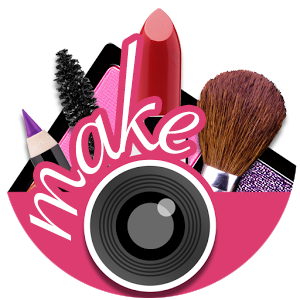
<style>
.page{position:relative;width:300px;height:300px;background:#ffffff}
.page>*{position:absolute;margin:0}
.t1{font:160px "SavoyeLetPlain";letter-spacing:-0.075em;color:#ffffff}
.t2{font:161px "SavoyeLetPlain";letter-spacing:-0.075em;color:#ffffff}
</style>
<div class="page">
<p class="t1" style="left:29px;top:40px;width:171px;height:201px"><span class="t2"> </span>make</p>
</div>
